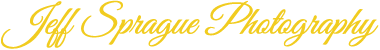
<style>
.page{position:relative;width:380px;height:50px;background:#ffffff}
.page>*{position:absolute;margin:0}
.t1{font:40px "GreatVibes-Regular";letter-spacing:-0.025em;color:#f1cc20;font-weight:bold;font-style:italic}
</style>
<div class="page">
<p class="t1" style="left:1px;top:0px;width:378px;height:49px">Jeff Sprague Photography</p>
</div>
